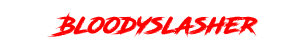
<style>
.page{position:relative;width:295px;height:50px;background:#ffffff}
.page>*{position:absolute;margin:0}
.t1{font:24px "RoadRage";color:#ff0000}
</style>
<div class="page">
<p class="t1" style="left:47px;top:12px;width:211px;height:26px">Bloodyslasher</p>
</div>
